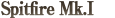
<style>
.page{position:relative;width:115px;height:18px;background:#ffffff}
.page>*{position:absolute;margin:0}
.t1{font:18px "RyuminPro-ExBold";letter-spacing:-0.06em;color:#4a3f32;font-weight:bold;scale:0.9 1}
</style>
<div class="page">
<p class="t1" style="left:1px;top:1px;width:93px;height:18px">Spitfire Mk.I</p>
</div>
